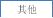
<style>
.page{position:relative;width:53px;height:18px;background:#ffffff}
.page>*{position:absolute;margin:0}
.t1{font:10px "SimSun"}
</style>
<div class="page">
<p class="t1" style="left:17px;top:4px;width:20px;height:10px">其他</p>
</div>
